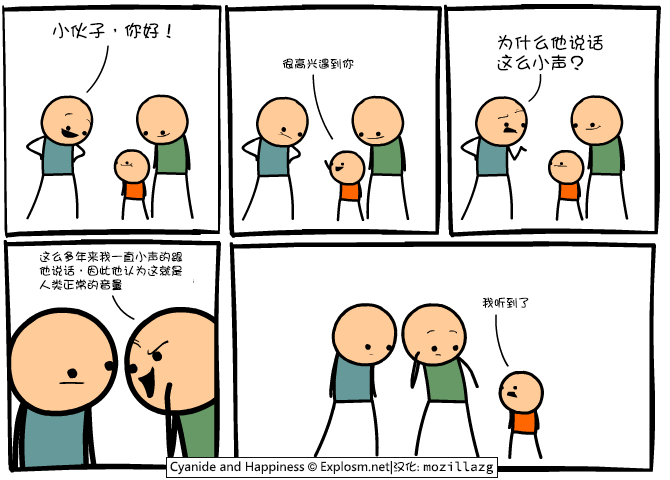
<style>
.page{position:relative;width:670px;height:480px;background:#ffffff}
.page>*{position:absolute;margin:0}
.t1{font:18px "DFGirl";color:#000000}
.t2{font:18px/20px "DFGirl";color:#000000}
.t3{font:12px "DFGirl";color:#000000}
.t4{font:12px/14px "DFGirl";color:#000000}
</style>
<div class="page">
<p class="t1" style="left:53px;top:22px;width:118px;height:17px">小伙子，你好！</p>
<p class="t2" style="left:497px;top:34px;width:106px;height:37px">为什么他说话<br>这么小声？</p>
<p class="t3" style="left:282px;top:58px;width:72px;height:11px">很高兴遇到你</p>
<p class="t4" style="left:39px;top:251px;width:144px;height:40px">这么多年来我一直小声的跟<br>他说话，因此他认为这就是<br>人类正常的音量</p>
<p class="t3" style="left:482px;top:297px;width:47px;height:11px">我听到了</p>
</div>
